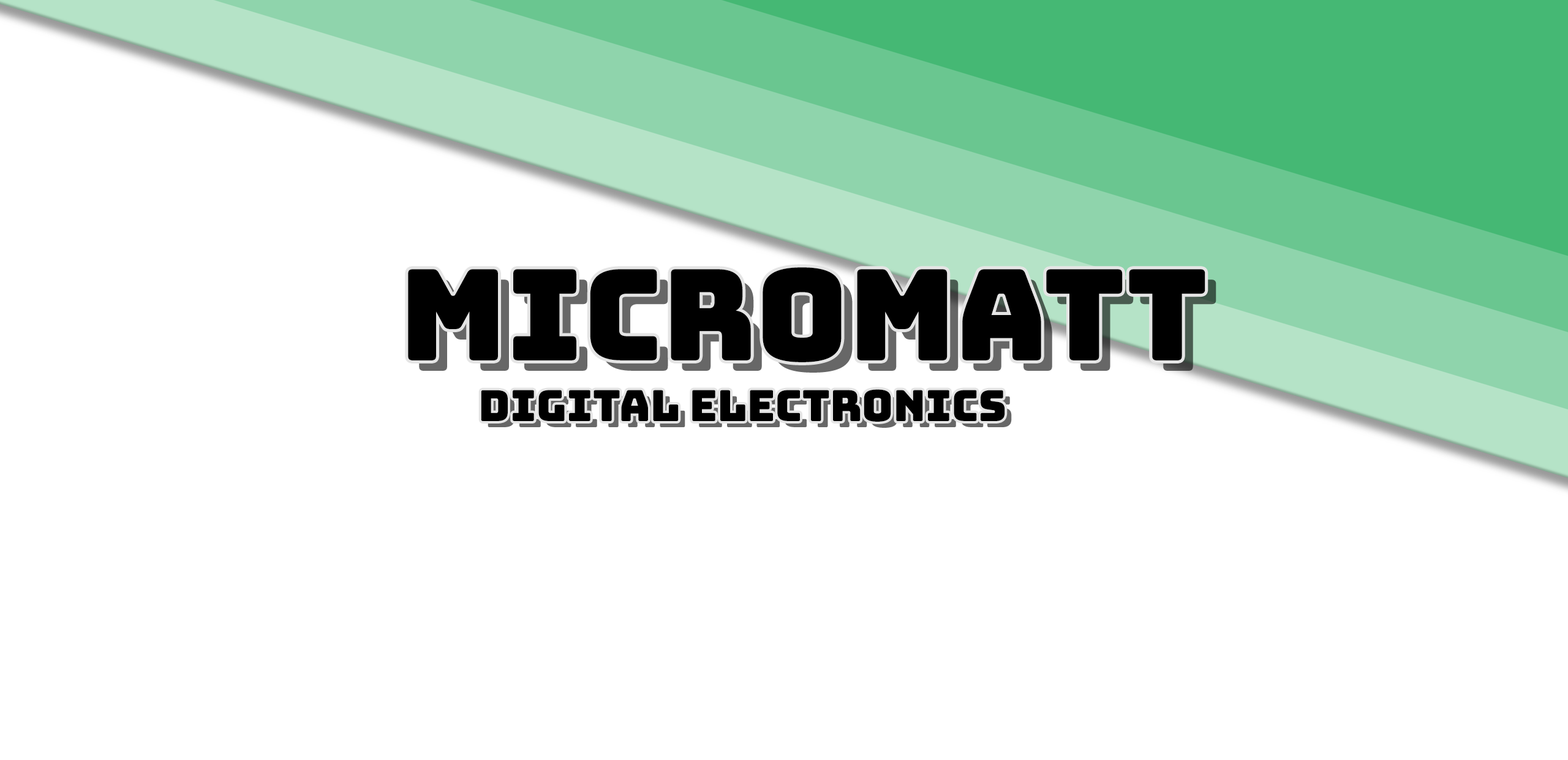
<style>
.page{position:relative;width:1568px;height:760px;background:#ffffff}
.page>*{position:absolute;margin:0}
.t1{font:126.3px "Bungee-Regular";color:#000000}
.t2{font:42.9px "Bungee-Regular";color:#000000}
</style>
<div class="page">
<p class="t1" style="left:408px;top:267px;width:797px;height:95px">micromatt</p>
<p class="t2" style="left:481px;top:389px;width:524px;height:32px">Digital Electronics</p>
</div>
